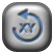
<style>
.page{position:relative;width:55px;height:55px;background:#ffffff}
.page>*{position:absolute;margin:0}
.t1{font:12px "ArialMT";color:#4376b1}
</style>
<div class="page">
<p class="t1" style="left:20px;top:24px;width:16px;height:9px">XY</p>
</div>
